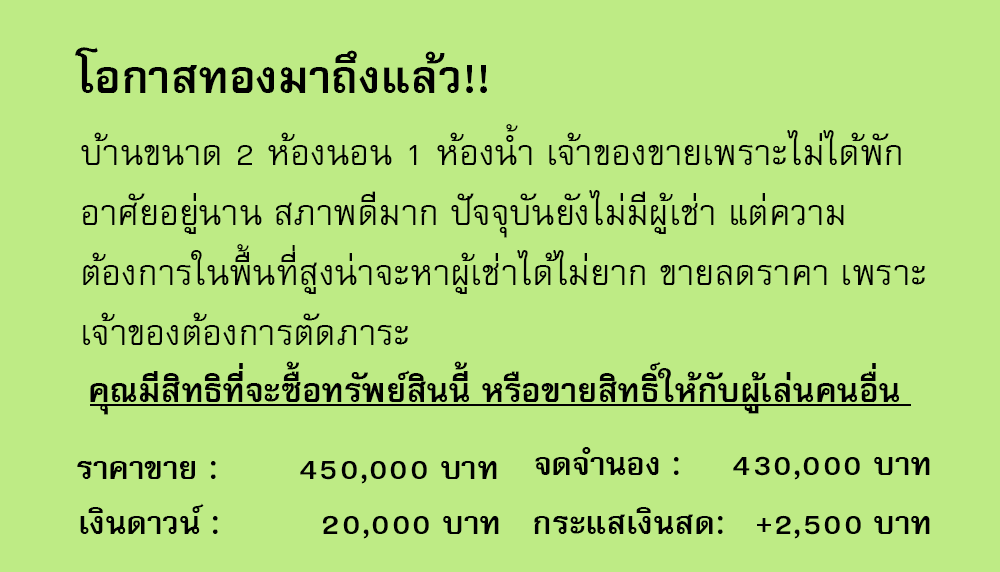
<style>
.page{position:relative;width:1000px;height:572px;background:#beeb85}
.page>*{position:absolute;margin:0}
.t1{font:64px "FreesiaUPCBold";color:#000000}
.t2{font:50px/60px "FreesiaUPC";color:#000000}
.t3{font:47px "FreesiaUPCBold";color:#000000}
.t4{font:45px "FreesiaUPCBold";color:#000000}
</style>
<div class="page">
<p class="t1" style="left:75px;top:47px;width:412px;height:46px">โอกาสทองมาถึงแล้ว!!</p>
<p class="t2" style="left:81px;top:124px;width:844px;height:221px">บ้านขนาด 2 ห้องนอน 1 ห้องน้ำ เจ้าของขายเพราะไม่ได้พัก<br>อาศัยอยู่นาน สภาพดีมาก ปัจจุบันยังไม่มีผู้เช่า แต่ความ<br>ต้องการในพื้นที่สูงน่าจะหาผู้เช่าได้ไม่ยาก ขายลดราคา เพราะ<br>เจ้าของต้องการตัดภาระ</p>
<p class="t3" style="left:90px;top:361px;width:810px;height:54px">คุณมีสิทธิที่จะซื้อทรัพย์สินนี้ หรือขายสิทธิ์ให้กับผู้เล่นคนอื่น</p>
<p class="t4" style="left:535px;top:447px;width:395px;height:33px">จดจำนอง :     430,000 บาท</p>
<p class="t4" style="left:77px;top:461px;width:420px;height:23px">ราคาขาย :        450,000 บาท</p>
<p class="t4" style="left:80px;top:503px;width:419px;height:36px">เงินดาวน์ :          20,000 บาท</p>
<p class="t4" style="left:534px;top:507px;width:396px;height:32px">กระแสเงินสด:   +2,500 บาท</p>
</div>
